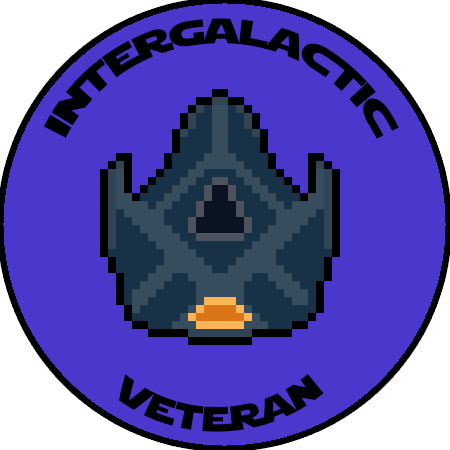
<style>
.page{position:relative;width:450px;height:450px;background:#4c37cd}
.page>*{position:absolute;margin:0}
.t1{font:35px "StarJedi";color:#000000}
</style>
<div class="page">
<p class="t1" style="left:43px;top:18px;width:356px;height:121px">intergalactic</p>
<p class="t1" style="left:118px;top:374px;width:206px;height:58px">veteran</p>
</div>
